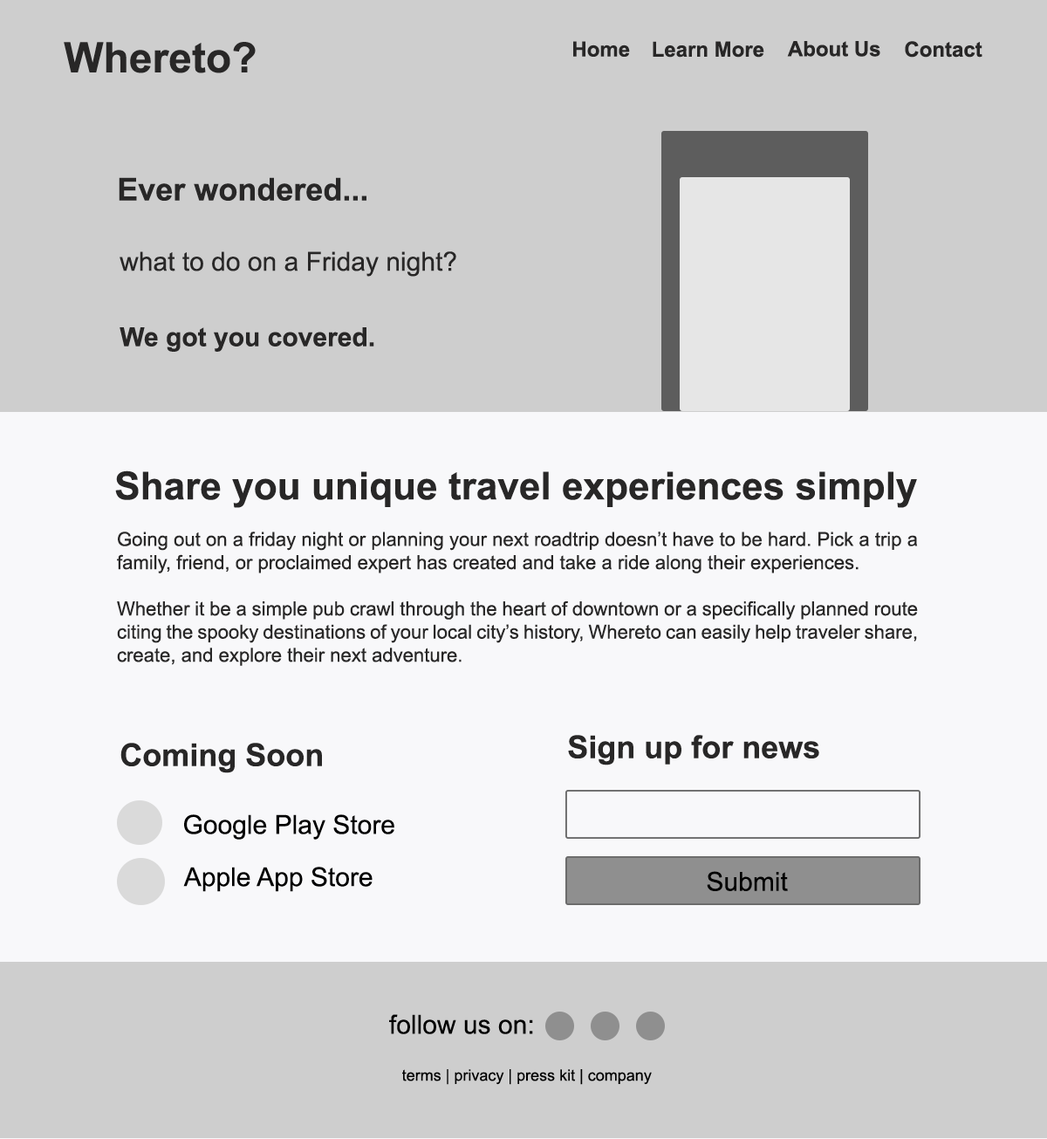
<style>
.page{position:relative;width:1047px;height:1139px;background:#cecece}
.page>*{position:absolute;margin:0}
.t1{font:41.9px "Arial-BoldMT";color:#282727}
.t2{font:20.9px "Arial-BoldMT";color:#282727}
.t3{font:31.4px "Arial-BoldMT";color:#282727}
.t4{font:26.2px "ArialMT";color:#282727}
.t5{font:26.2px "Arial-BoldMT";color:#282727}
.t6{font:38.6px "Arial-BoldMT";color:#282727}
.t7{font:19.3px "ArialMT";color:#282727}
.t8{font:26.2px "ArialMT";color:#000000}
.t9{font:15.7px "ArialMT";color:#000000}
</style>
<div class="page">
<p class="t1" style="left:64px;top:42px;width:192px;height:31px">Whereto?</p>
<p class="t2" style="left:573px;top:41px;width:57px;height:16px">Home</p>
<p class="t2" style="left:653px;top:41px;width:111px;height:17px">Learn More</p>
<p class="t2" style="left:787px;top:41px;width:93px;height:16px">About Us</p>
<p class="t2" style="left:905px;top:41px;width:78px;height:17px">Contact</p>
<p class="t3" style="left:119px;top:177px;width:247px;height:24px">Ever wondered...</p>
<p class="t4" style="left:120px;top:251px;width:336px;height:26px">what to do on a Friday night?</p>
<p class="t5" style="left:120px;top:327px;width:254px;height:25px">We got you covered.</p>
<p class="t6" style="left:115px;top:470px;width:802px;height:38px">Share you unique travel experiences simply</p>
<p class="t7" style="left:117px;top:531px;width:801px;height:135px;text-align:justify">Going out on a friday night or planning your next roadtrip doesn’t have to be hard. Pick a trip a family, friend, or proclaimed expert has created and take a ride along their experiences. <br><br>Whether it be a simple pub crawl through the heart of downtown or a specifically planned route citing the spooky destinations of your local city’s history, Whereto can easily help traveler share, create, and explore their next adventure.</p>
<p class="t3" style="left:568px;top:735px;width:251px;height:30px">Sign up for news</p>
<p class="t3" style="left:120px;top:743px;width:202px;height:30px">Coming Soon</p>
<p class="t8" style="left:184px;top:814px;width:210px;height:25px">Google Play Store</p>
<p class="t8" style="left:183px;top:867px;width:190px;height:25px">Apple App Store</p>
<p class="t8" style="left:707px;top:871px;width:81px;height:20px">Submit</p>
<p class="t8" style="left:389px;top:1014px;width:144px;height:20px">follow us on:</p>
<p class="t9" style="left:402px;top:1069px;width:250px;height:16px">terms | privacy | press kit | company</p>
</div>
